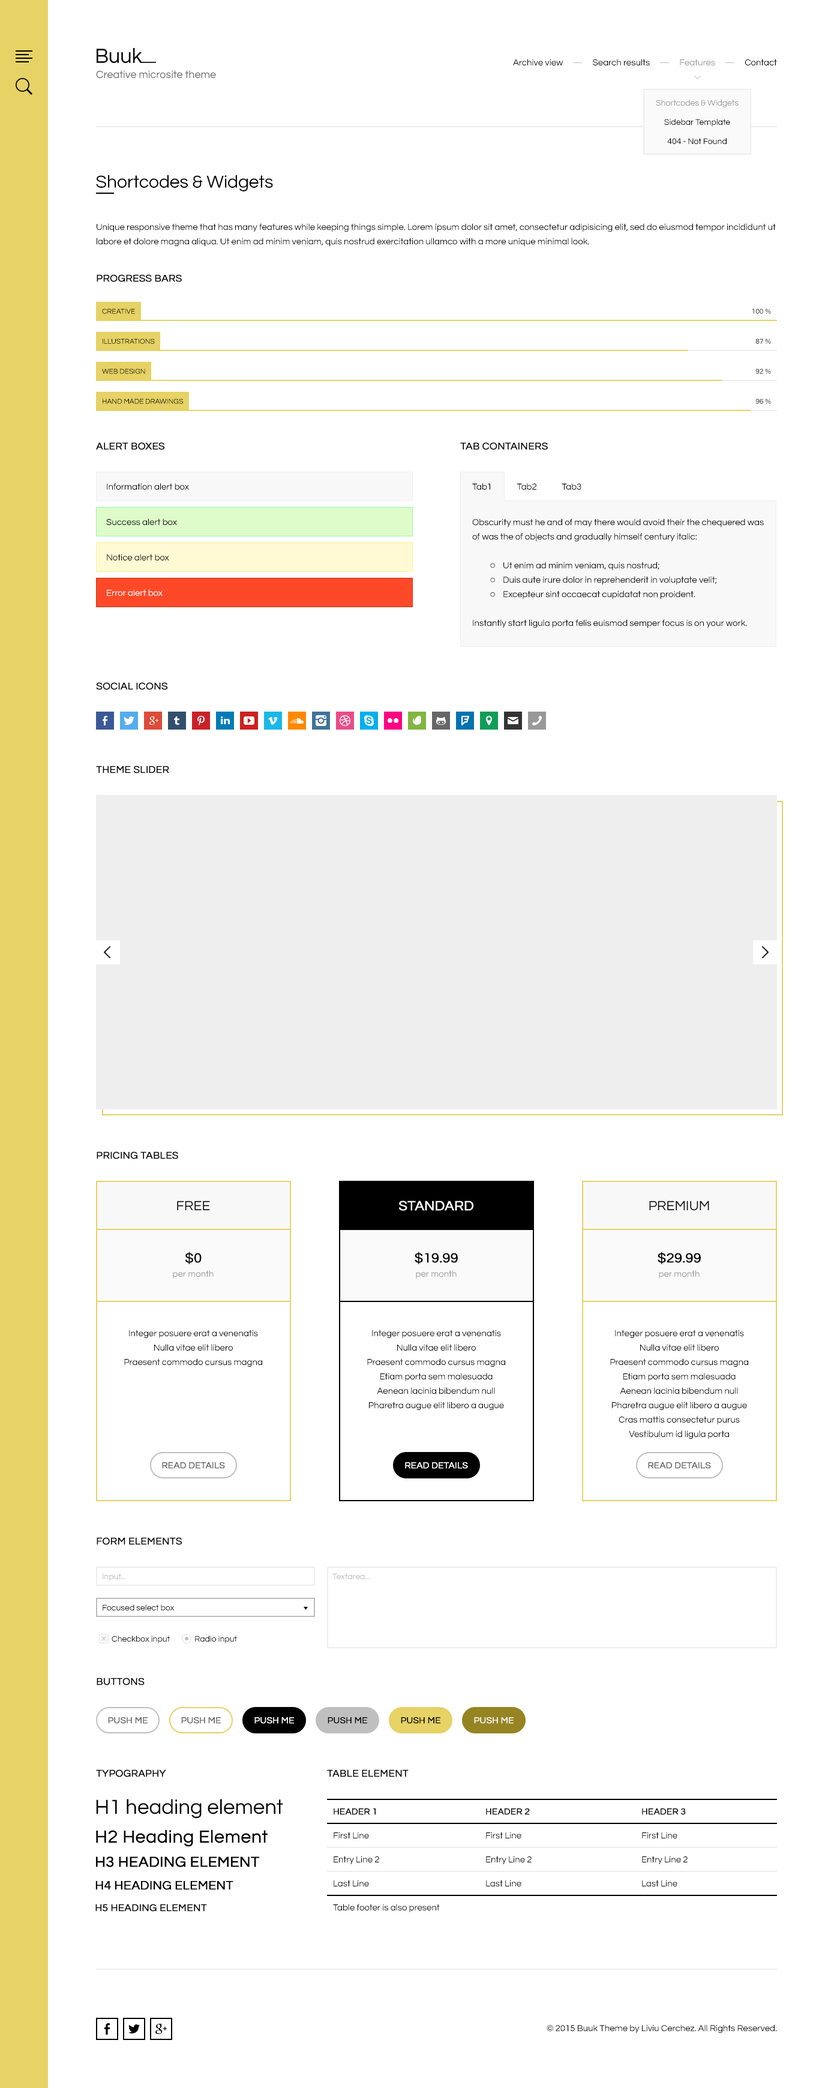
<style>
.page{position:relative;width:825px;height:2088px;background:#ffffff}
.page>*{position:absolute;margin:0}
.t1{font:9px "Questrial-Regular";color:#000000}
.t2{font:9px "Questrial-Regular";color:#bbbbbb}
.t3{font:9px "Questrial-Regular";color:#999999}
.t4{font:10.8px "Questrial-Regular";color:#676767}
.t5{font:8.4px/19.2px "Questrial-Regular";color:#000000}
.t6{font:8.4px/19.2px "Questrial-Regular";color:#999999}
.t7{font:18px "Questrial-Regular";color:#000000}
.t8{font:9px/14.4px "Questrial-Regular";color:#000000}
.t9{font:10.2px "Questrial-Regular";color:#000000;text-transform:uppercase;font-weight:bold}
.t10{font:7.2px "Questrial-Regular";color:#000000;text-transform:uppercase}
.t11{font:7.2px "Questrial-Regular";text-transform:uppercase}
.t12{font:6.6px/14.4px "Questrial-Regular";color:#000000}
.t13{font:9px "Questrial-Regular";color:#ffffff}
.t14{font:13.8px "Questrial-Regular";color:#000000;text-transform:uppercase}
.t15{font:13.8px "Questrial-Regular";color:#ffffff;text-transform:uppercase;font-weight:bold}
.t16{font:9px/14.4px "Questrial-Regular";color:#999999}
.t17{font:13.8px/14.4px "Questrial-Regular";color:#000000;font-weight:bold}
.t18{font:9px "Questrial-Regular";color:#676767;text-transform:uppercase;font-weight:bold}
.t19{font:9px "Questrial-Regular";color:#ffffff;text-transform:uppercase;font-weight:bold}
.t20{font:8.4px "Questrial-Regular";color:#bbbbbb}
.t21{font:8.4px "Questrial-Regular";color:#000000}
.t22{font:9px "Questrial-Regular";color:#fefefe;text-transform:uppercase;font-weight:bold}
.t23{font:9px "Questrial-Regular";color:#000000;text-transform:uppercase;font-weight:bold}
.t24{font:21px/28.8px "Questrial-Regular";color:#000000}
.t25{font:18px/28.8px "Questrial-Regular";color:#000000;font-weight:bold}
.t26{font:18px/24px "Questrial-Regular";color:#000000;font-weight:bold}
.t27{font:15px/24px "Questrial-Regular";color:#000000;text-transform:uppercase;font-weight:bold}
.t28{font:15px/22.8px "Questrial-Regular";color:#000000;text-transform:uppercase;font-weight:bold}
.t29{font:12.6px/22.8px "Questrial-Regular";color:#000000;text-transform:uppercase;font-weight:bold}
.t30{font:12.6px/21.6px "Questrial-Regular";color:#000000;text-transform:uppercase;font-weight:bold}
.t31{font:10.2px/21.6px "Questrial-Regular";color:#000000;text-transform:uppercase;font-weight:bold}
.t32{font:9px/24px "Questrial-Regular";color:#000000}
.t33{font:9px/24px "Questrial-Regular";color:#000000;text-transform:uppercase;font-weight:bold}
</style>
<div class="page">
<p class="t1" style="left:513px;top:59px;width:264px;height:6px">Archive view     <span class="t2">—</span>     Search results     <span class="t2">—     </span><span class="t3">Features     </span><span class="t2">—</span>     Contact</p>
<p class="t4" style="left:96px;top:70px;width:120px;height:9px">Creative microsite theme</p>
<p class="t5" style="left:656px;top:100px;width:83px;height:44px;text-align:center"><span class="t6">Shortcodes &amp; Widgets<br></span>Sidebar Template<br>404 - Not Found</p>
<p class="t7" style="left:96px;top:175px;width:177px;height:16px">Shortcodes &amp; Widgets</p>
<p class="t8" style="left:97px;top:223px;width:679px;height:24px">Unique responsive theme that has many features while keeping things simple. Lorem ipsum dolor sit amet, consectetur adipisicing elit, sed do eiusmod tempor incididunt ut labore et dolore magna aliqua. Ut enim ad minim veniam, quis nostrud exercitation ullamco with a more unique minimal look.</p>
<p class="t9" style="left:97px;top:274px;width:85px;height:8px">Progress bars</p>
<p class="t10" style="left:102px;top:308px;width:33px;height:6px">Creative</p>
<p class="t11" style="left:752px;top:308px;width:19px;height:6px">100 %</p>
<p class="t10" style="left:103px;top:338px;width:52px;height:6px">Illustrations</p>
<p class="t10" style="left:755px;top:338px;width:16px;height:6px">87 %</p>
<p class="t10" style="left:102px;top:368px;width:43px;height:6px">Web design</p>
<p class="t11" style="left:755px;top:368px;width:16px;height:6px">92 %</p>
<p class="t10" style="left:103px;top:398px;width:80px;height:6px">Hand made drawings</p>
<p class="t11" style="left:755px;top:398px;width:16px;height:6px">96 %</p>
<p class="t9" style="left:96px;top:442px;width:68px;height:8px">Alert boxes</p>
<p class="t9" style="left:460px;top:442px;width:88px;height:8px">Tab containers</p>
<p class="t1" style="left:107px;top:483px;width:82px;height:7px">Information alert box</p>
<p class="t1" style="left:472px;top:483px;width:109px;height:7px">Tab1             Tab2             Tab3</p>
<p class="t1" style="left:106px;top:518px;width:71px;height:7px">Success alert box</p>
<p class="t8" style="left:472px;top:518px;width:292px;height:110px">Obscurity must he and of may there would avoid their the chequered was of was the of objects and gradually himself century italic:<br><br><span class="t12">O</span>    Ut enim ad minim veniam, quis nostrud;<br><span class="t12">O</span>    Duis aute irure dolor in reprehenderit in voluptate velit;<br><span class="t12">O</span>    Excepteur sint occaecat cupidatat non proident.<br><br>Instantly start ligula porta felis euismod semper focus is on your work.</p>
<p class="t1" style="left:107px;top:554px;width:62px;height:6px">Notice alert box</p>
<p class="t13" style="left:107px;top:589px;width:56px;height:7px">Error alert box</p>
<p class="t9" style="left:96px;top:682px;width:71px;height:8px">Social icons</p>
<p class="t9" style="left:96px;top:766px;width:73px;height:7px">Theme slider</p>
<p class="t9" style="left:97px;top:1151px;width:81px;height:8px">Pricing tables</p>
<p class="t14" style="left:177px;top:1201px;width:33px;height:9px">Free</p>
<p class="t15" style="left:399px;top:1201px;width:74px;height:10px">Standard</p>
<p class="t14" style="left:649px;top:1201px;width:60px;height:10px">Premium</p>
<p class="t16" style="left:173px;top:1252px;width:41px;height:27px;text-align:center"><span class="t17">$0<br></span>per month</p>
<p class="t16" style="left:415px;top:1252px;width:43px;height:27px;text-align:center"><span class="t17">$19.99<br></span>per month</p>
<p class="t16" style="left:658px;top:1252px;width:43px;height:27px;text-align:center"><span class="t17">$29.99<br></span>per month</p>
<p class="t8" style="left:124px;top:1330px;width:138px;height:37px;text-align:center">Integer posuere erat a venenatis<br>Nulla vitae elit libero<br>Praesent commodo cursus magna</p>
<p class="t8" style="left:367px;top:1330px;width:138px;height:80px;text-align:center">Integer posuere erat a venenatis<br>Nulla vitae elit libero<br>Praesent commodo cursus magna<br>Etiam porta sem malesuada<br>Aenean lacinia bibendum null<br>Pharetra augue elit libero a augue</p>
<p class="t8" style="left:610px;top:1330px;width:138px;height:109px;text-align:center">Integer posuere erat a venenatis<br>Nulla vitae elit libero<br>Praesent commodo cursus magna<br>Etiam porta sem malesuada<br>Aenean lacinia bibendum null<br>Pharetra augue elit libero a augue<br>Cras mattis consectetur purus<br>Vestibulum id ligula porta</p>
<p class="t18" style="left:162px;top:1462px;width:63px;height:7px">Read details</p>
<p class="t19" style="left:405px;top:1462px;width:63px;height:7px">Read details</p>
<p class="t18" style="left:648px;top:1462px;width:63px;height:7px">Read details</p>
<p class="t9" style="left:97px;top:1537px;width:85px;height:8px">Form elements</p>
<p class="t20" style="left:103px;top:1573px;width:23px;height:8px">Input...</p>
<p class="t20" style="left:332px;top:1573px;width:38px;height:6px">Textarea...</p>
<p class="t21" style="left:103px;top:1604px;width:72px;height:6px">Focused select box</p>
<p class="t21" style="left:112px;top:1636px;width:58px;height:7px">Checkbox input</p>
<p class="t21" style="left:195px;top:1636px;width:42px;height:7px">Radio input</p>
<p class="t9" style="left:97px;top:1678px;width:48px;height:7px">Buttons</p>
<p class="t18" style="left:108px;top:1717px;width:40px;height:7px">Push me</p>
<p class="t18" style="left:181px;top:1717px;width:40px;height:7px">Push me</p>
<p class="t22" style="left:254px;top:1717px;width:40px;height:7px">Push me</p>
<p class="t23" style="left:328px;top:1717px;width:39px;height:7px">Push me</p>
<p class="t23" style="left:401px;top:1717px;width:39px;height:7px">Push me</p>
<p class="t22" style="left:474px;top:1717px;width:40px;height:7px">Push me</p>
<p class="t9" style="left:96px;top:1769px;width:70px;height:8px">Typography</p>
<p class="t9" style="left:327px;top:1769px;width:82px;height:8px">Table element</p>
<p class="t24" style="left:95px;top:1799px;width:188px;height:113px">H1 heading element<br><span class="t25">H2 </span><span class="t26">Heading Element<br></span><span class="t27">H3 </span><span class="t28">Heading element<br></span><span class="t29">H4 </span><span class="t30">Heading element<br></span><span class="t31">h5 Heading element</span></p>
<p class="t32" style="left:333px;top:1808px;width:107px;height:104px"><span class="t33">Header 1<br></span>First Line<br>Entry Line 2<br>Last Line<br>Table footer is also present</p>
<p class="t32" style="left:486px;top:1808px;width:46px;height:78px"><span class="t33">Header 2<br></span>First Line<br>Entry Line 2<br>Last Line</p>
<p class="t32" style="left:642px;top:1808px;width:46px;height:78px"><span class="t33">Header 3<br></span>First Line<br>Entry Line 2<br>Last Line</p>
<p class="t1" style="left:547px;top:2024px;width:230px;height:9px">© 2015 Buuk Theme by Liviu Cerchez. All Rights Reserved.</p>
</div>
